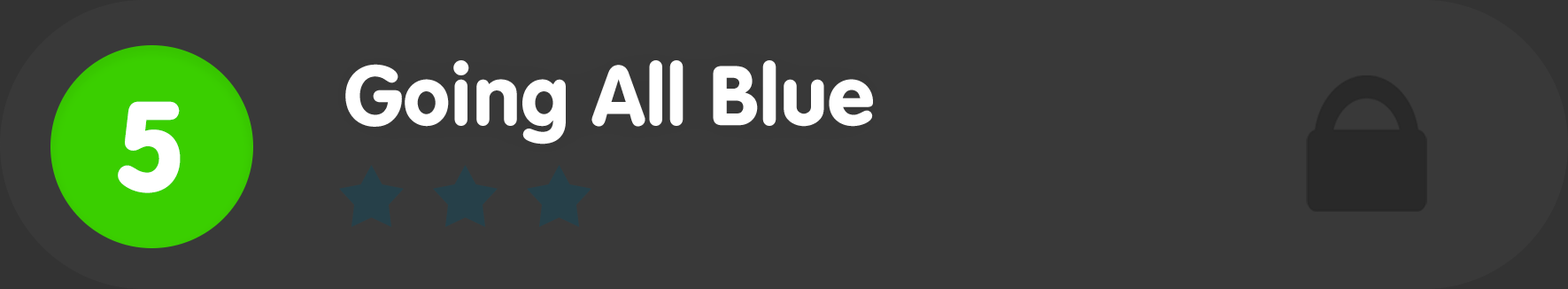
<style>
.page{position:relative;width:1568px;height:289px;background:#393939}
.page>*{position:absolute;margin:0}
.t1{font:88.5px "VAGRundschriftD";color:#ffffff}
.t2{font:132.8px "VAGRundschriftD";color:#ffffff}
</style>
<div class="page">
<p class="t1" style="left:345px;top:60px;width:528px;height:84px">Going All Blue</p>
<p class="t2" style="left:118px;top:101px;width:63px;height:92px">5</p>
</div>
